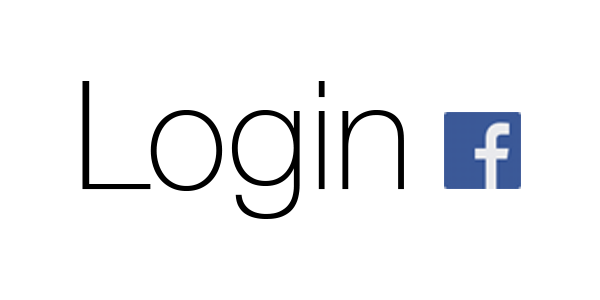
<style>
.page{position:relative;width:600px;height:300px;background:#ffffff}
.page>*{position:absolute;margin:0}
.t1{font:151.1px "HelveticaNeue-Thin";color:#000000}
</style>
<div class="page">
<p class="t1" style="left:82px;top:81px;width:322px;height:138px">Login</p>
</div>
